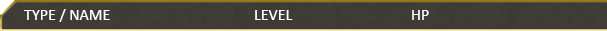
<style>
.page{position:relative;width:607px;height:31px}
.page>*{position:absolute;margin:0}
.t1{font:16px "Calibri";color:#ffffff}
</style>
<div class="page">
<p class="t1" style="left:24px;top:9px;width:86px;height:13px">TYPE / NAME</p>
<p class="t1" style="left:255px;top:10px;width:38px;height:10px">LEVEL</p>
<p class="t1" style="left:412px;top:10px;width:17px;height:10px">HP</p>
</div>
